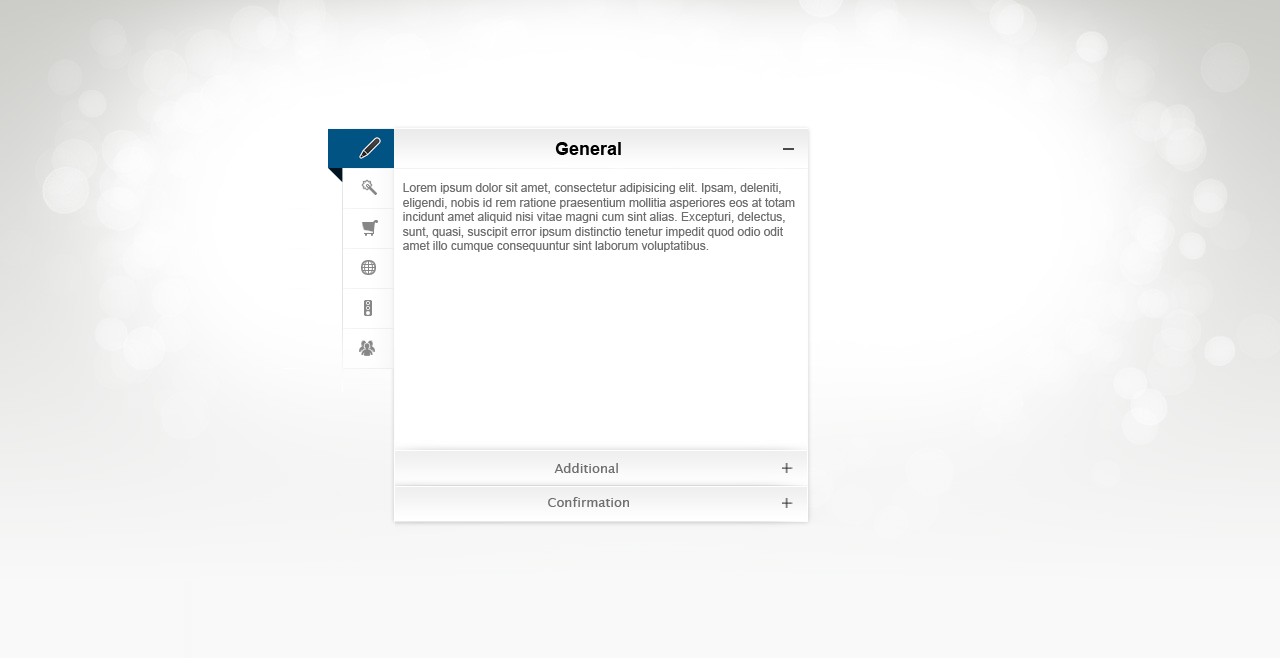
<style>
.page{position:relative;width:1280px;height:658px;background:#ffffff}
.page>*{position:absolute;margin:0}
.t1{font:18px "Arial-BoldMT";color:#000000}
.t2{font:12px "ArialMT";color:#6f6f6f}
.t3{font:13px "LucidaSansUnicode";color:#6f6f6f}
</style>
<div class="page">
<p class="t1" style="left:555px;top:142px;width:66px;height:13px">General</p>
<p class="t2" style="left:403px;top:183px;width:392px;height:69px">Lorem ipsum dolor sit amet, consectetur adipisicing elit. Ipsam, deleniti,<br>eligendi, nobis id rem ratione praesentium mollitia asperiores eos at totam<br>incidunt amet aliquid nisi vitae magni cum sint alias. Excepturi, delectus,<br>sunt, quasi, suscipit error ipsum distinctio tenetur impedit quod odio odit<br>amet illo cumque consequuntur sint laborum voluptatibus.</p>
<p class="t3" style="left:554px;top:463px;width:64px;height:10px">Additional</p>
<p class="t3" style="left:548px;top:497px;width:81px;height:10px">Confirmation</p>
</div>
